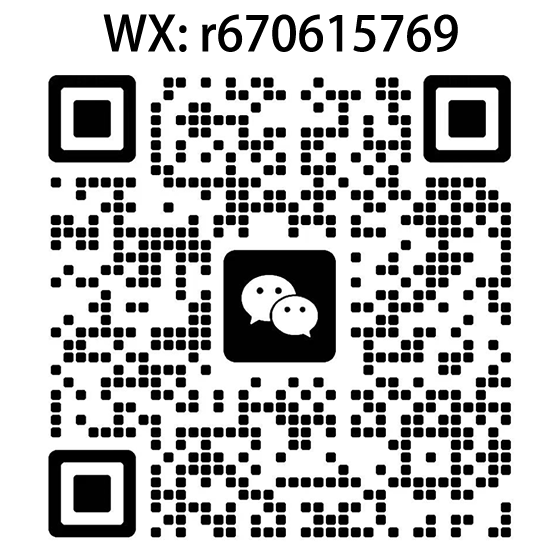
<style>
.page{position:relative;width:560px;height:560px;background:#ffffff}
.page>*{position:absolute;margin:0}
.t1{font:48px "AdobeHeitiStd-Regular";color:#000000}
</style>
<div class="page">
<p class="t1" style="left:103px;top:14px;width:355px;height:38px">WX: r670615769</p>
</div>
